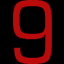
<style>
.page{position:relative;width:64px;height:64px;background:#000000}
.page>*{position:absolute;margin:0}
.t1{font:88px "MKSansTallX";color:#ba0a0a}
</style>
<div class="page">
<p class="t1" style="left:13px;top:0px;width:39px;height:64px">9</p>
</div>
